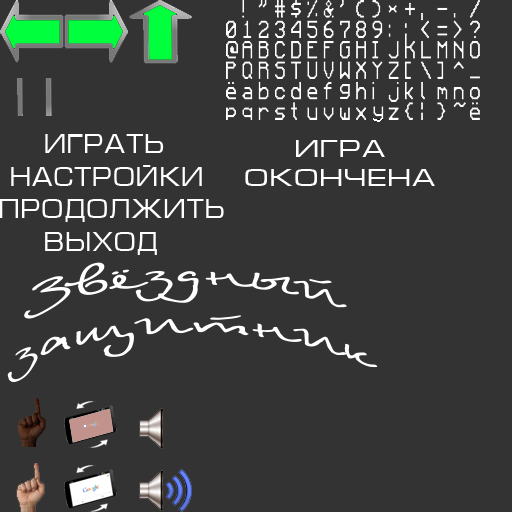
<style>
.page{position:relative;width:512px;height:512px;background:#333333}
.page>*{position:absolute;margin:0}
.t1{font:27.3px "Micra";color:#ffffff;scale:0.84 1}
.t2{font:23.9px "Micra";color:#ffffff;scale:1.07 1}
.t3{font:39.9px "BetinaScriptCTT-Regular";color:#ffffff;scale:1.99 1}
</style>
<div class="page">
<p class="t1" style="left:0px;top:134px;width:224px;height:121px">ИГРАТЬ<br> Настройки<br>Продолжить<br>    ВЫХОД</p>
<p class="t2" style="left:245px;top:140px;width:190px;height:46px">ИГРА <br>ОКОНЧЕНА</p>
<p class="t3" style="left:7px;top:262px;width:371px;height:121px">Звёздный <br>защитник</p>
</div>
